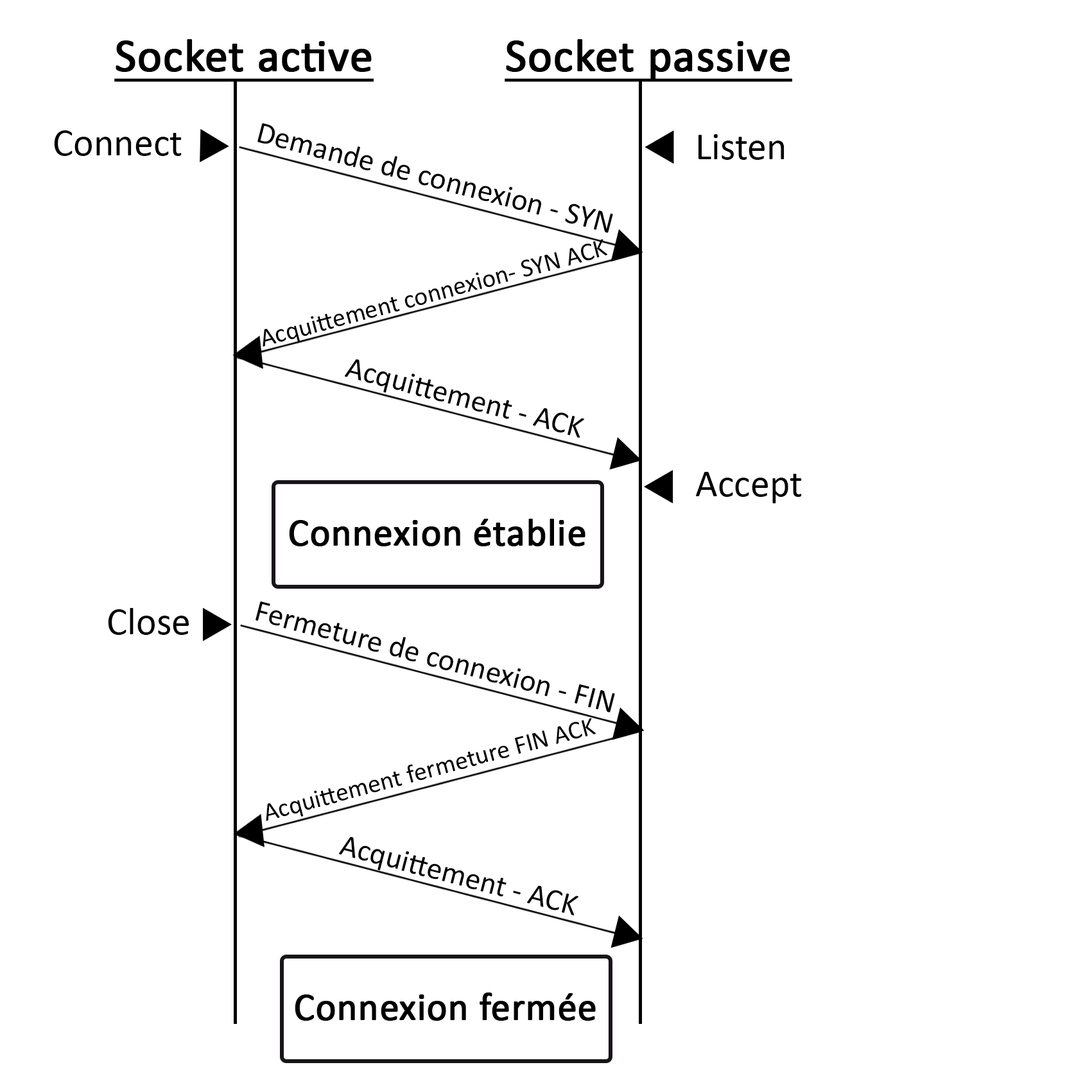
<style>
.page{position:relative;width:1092px;height:1092px;background:#ffffff}
.page>*{position:absolute;margin:0}
.t1{font:46.2px "Calibri";color:#000000;font-weight:bold;text-decoration:underline}
.t2{font:30.8px "Calibri";color:#000000}
.t3{font:38.5px "Calibri";color:#000000}
.t4{font:25.7px "Calibri";color:#000000}
.t5{font:38.5px "Calibri";color:#000000;font-weight:bold}
</style>
<div class="page">
<p class="t1" style="left:114px;top:39px;width:260px;height:43px">Socket active</p>
<p class="t1" style="left:505px;top:39px;width:287px;height:43px">Socket passive</p>
<p class="t2" style="left:257px;top:123px;width:356px;height:110px;rotate:15deg">Demande de connexion - SYN</p>
<p class="t3" style="left:54px;top:130px;width:128px;height:26px">Connect</p>
<p class="t3" style="left:698px;top:134px;width:86px;height:26px">Listen</p>
<p class="t4" style="left:263px;top:239px;width:344px;height:108px;rotate:-15deg">Acquittement connexion- SYN ACK</p>
<p class="t2" style="left:345px;top:359px;width:239px;height:79px;rotate:15deg">Acquittement - ACK</p>
<p class="t3" style="left:696px;top:472px;width:106px;height:31px">Accept</p>
<p class="t5" style="left:289px;top:519px;width:296px;height:27px">Connexion établie</p>
<p class="t2" style="left:256px;top:602px;width:359px;height:111px;rotate:15deg">Fermeture de connexion - FIN</p>
<p class="t3" style="left:108px;top:608px;width:81px;height:27px">Close</p>
<p class="t4" style="left:266px;top:718px;width:330px;height:103px;rotate:-15deg">Acquittement fermeture FIN ACK</p>
<p class="t2" style="left:339px;top:836px;width:239px;height:79px;rotate:15deg">Acquittement - ACK</p>
<p class="t5" style="left:295px;top:992px;width:301px;height:29px">Connexion fermée</p>
</div>
